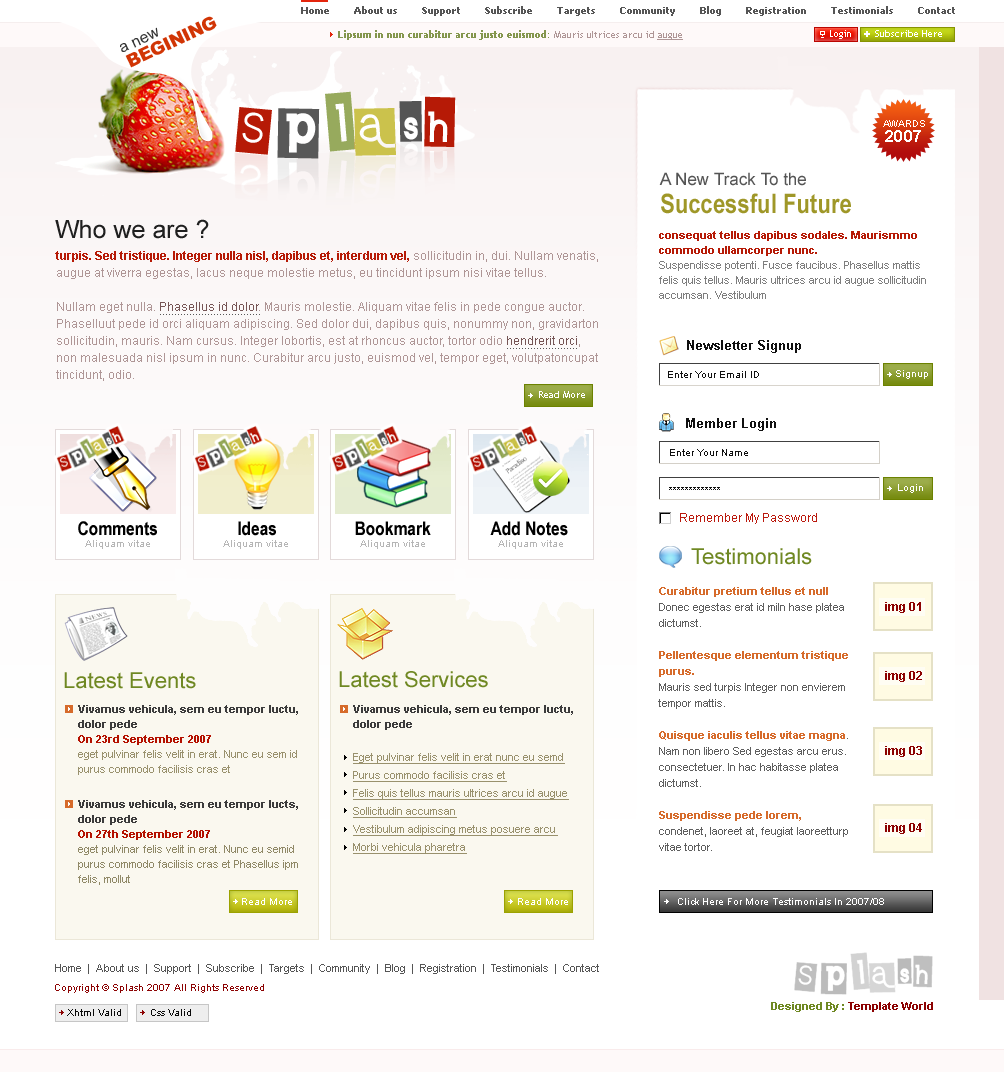
<style>
.page{position:relative;width:1004px;height:1072px;background:#ffffff}
.page>*{position:absolute;margin:0}
.t1{font:10px "Tahoma-Bold";color:#555555}
.t2{font:18px "Arial-Black";letter-spacing:-0.025em;color:#d13505}
.t3{font:16px "ArialMT";color:#333333}
.t4{font:10px "TrebuchetMS-Bold";color:#84964d}
.t5{font:10px "TrebuchetMS";color:#af9696}
.t6{font:10px "TrebuchetMS";color:#af9696;text-decoration:underline}
.t7{font:10px "TrebuchetMS";color:#ffffff}
.t8{font:10px "ArialMT";color:#ffffff;text-transform:uppercase}
.t9{font:17px "Arial-BoldMT";letter-spacing:0.025em;color:#ffffff;text-transform:uppercase}
.t10{font:17px/14px "ArialMT";color:#555555}
.t11{font:27px/14px "ArialNarrow-Bold";color:#9f9728}
.t12{font:25px "ArialMT";color:#1f1f1f}
.t13{font:11px/15px "ArialMT";color:#7e7e7e}
.t14{font:11px/15px "Arial-BoldMT";color:#b61a06}
.t15{font:12px/17px "ArialMT";color:#af9696}
.t16{font:12px/17px "Arial-BoldMT";color:#b61a06}
.t17{font:12px/17px "ArialMT";color:#765555}
.t18{font:13px "Arial-BoldMT";color:#101010}
.t19{font:10px "ArialMT";color:#101010}
.t20{font:10px "ArialMT";color:#ffffff}
.t21{font:19px "ArialNarrow-Bold";color:#000000}
.t22{font:12px "ArialMT";color:#bb190d}
.t23{font:10px "ArialMT";color:#b6b6b6}
.t24{font:22px "ArialMT";color:#6f8822}
.t25{font:11px/16px "ArialMT";color:#5e5e5e}
.t26{font:11px/16px "Arial-BoldMT";color:#d66b2b}
.t27{font:12px "Arial-BoldMT";color:#8c0202}
.t28{font:11px/15px "ArialMT";color:#99916d}
.t29{font:11px/15px "Arial-BoldMT";color:#3c3c3c}
.t30{font:11px/15px "Arial-BoldMT";color:#b41100}
.t31{font:11px/18px "ArialMT";color:#99916d;text-decoration:underline}
.t32{font:11px/15px "ArialMT";color:#908967}
.t33{font:11px "ArialMT";color:#555555}
.t34{font:10px "ArialMT";color:#8c0202}
.t35{font:10px "ArialMT";color:#0a0a0a}
.t36{font:11px "Arial-BoldMT";color:#8c0202}
.t37{font:11px "Arial-BoldMT";color:#6f8822}
</style>
<div class="page">
<p class="t1" style="left:301px;top:6px;width:654px;height:10px">Home        About us        Support        Subscribe        Targets        Community        Blog        Registration        Testimonials        Contact</p>
<p class="t2" style="left:125px;top:16px;width:92px;height:52px;rotate:-26deg">BEGINING</p>
<p class="t3" style="left:120px;top:27px;width:38px;height:25px;rotate:-25deg">a new</p>
<p class="t4" style="left:338px;top:30px;width:345px;height:10px">Lipsum in nun curabitur arcu justo euismod: <span class="t5">Mauris ultrices arcu id </span><span class="t6">augue</span></p>
<p class="t7" style="left:830px;top:30px;width:21px;height:9px">Login</p>
<p class="t7" style="left:875px;top:30px;width:67px;height:7px">Subscribe Here</p>
<p class="t8" style="left:883px;top:120px;width:42px;height:7px">awards</p>
<p class="t9" style="left:885px;top:130px;width:36px;height:12px">2007</p>
<p class="t10" style="left:659px;top:172px;width:192px;height:42px">A New Track To the <br><br><span class="t11">Successful Future</span></p>
<p class="t12" style="left:55px;top:219px;width:154px;height:20px">Who we are ?</p>
<p class="t13" style="left:659px;top:231px;width:267px;height:68px"><span class="t14">consequat tellus dapibus sodales. Maurismmo commodo ullamcorper nunc. <br></span>Suspendisse potenti. Fusce faucibus. Phasellus mattis felis quis tellus. Mauris ultrices arcu id augue sollicitudin accumsan. Vestibulum</p>
<p class="t15" style="left:55px;top:251px;width:543px;height:130px"><span class="t16">turpis. Sed tristique. Integer nulla nisl, dapibus et, interdum vel,</span> sollicitudin in, dui. Nullam venatis, augue at viverra egestas, lacus neque molestie metus, eu tincidunt ipsum nisi vitae tellus. <br><br>Nullam eget nulla. <span class="t17">Phasellus id dolor</span>. Mauris molestie. Aliquam vitae felis in pede congue auctor. Phaselluut pede id orci aliquam adipiscing. Sed dolor dui, dapibus quis, nonummy non, gravidarton sollicitudin, mauris. Nam cursus. Integer lobortis, est at rhoncus auctor, tortor odio <span class="t17">hendrerit orci</span>, non malesuada nisl ipsum in nunc. Curabitur arcu justo, euismod vel, tempor eget, volutpatoncupat tincidunt, odio.</p>
<p class="t18" style="left:687px;top:340px;width:114px;height:13px">Newsletter Signup</p>
<p class="t19" style="left:668px;top:371px;width:91px;height:7px">Enter Your Email ID</p>
<p class="t20" style="left:896px;top:370px;width:32px;height:9px">Signup</p>
<p class="t7" style="left:539px;top:391px;width:46px;height:7px">Read More</p>
<p class="t18" style="left:686px;top:418px;width:90px;height:13px">Member Login</p>
<p class="t19" style="left:670px;top:449px;width:78px;height:7px">Enter Your Name</p>
<p class="t20" style="left:898px;top:484px;width:25px;height:9px">Login</p>
<p class="t19" style="left:669px;top:487px;width:51px;height:3px">*************</p>
<p class="t21" style="left:78px;top:521px;width:79px;height:15px">Comments</p>
<p class="t21" style="left:238px;top:521px;width:38px;height:15px">Ideas</p>
<p class="t21" style="left:355px;top:521px;width:76px;height:15px">Bookmark</p>
<p class="t21" style="left:490px;top:521px;width:78px;height:15px">Add Notes</p>
<p class="t22" style="left:680px;top:513px;width:137px;height:11px">Remember My Password</p>
<p class="t23" style="left:85px;top:540px;width:65px;height:9px">Aliquam vitae</p>
<p class="t23" style="left:223px;top:540px;width:65px;height:9px">Aliquam vitae</p>
<p class="t23" style="left:360px;top:540px;width:65px;height:9px">Aliquam vitae</p>
<p class="t23" style="left:498px;top:540px;width:65px;height:9px">Aliquam vitae</p>
<p class="t24" style="left:691px;top:548px;width:121px;height:17px">Testimonials</p>
<p class="t25" style="left:658px;top:587px;width:190px;height:264px"><span class="t26">Curabitur pretium tellus et null<br></span>Donec egestas erat id miIn hase platea dictumst.<br><br><span class="t26">Pellentesque elementum tristique purus.</span> <br>Mauris sed turpis Integer non envierem tempor mattis. <br><br><span class="t26">Quisque iaculis tellus vitae magna</span>.<br>Nam non libero Sed egestas arcu erus. <br>consectetuer. In hac habitasse platea dictumst.<br><br><span class="t26">Suspendisse pede lorem,</span> <br>condenet, laoreet at, feugiat laoreetturp<br>vitae tortor.</p>
<p class="t27" style="left:885px;top:602px;width:36px;height:11px">img 01</p>
<p class="t24" style="left:64px;top:672px;width:132px;height:17px">Latest Events</p>
<p class="t24" style="left:339px;top:671px;width:149px;height:17px">Latest Services</p>
<p class="t27" style="left:885px;top:671px;width:37px;height:11px">img 02</p>
<p class="t28" style="left:78px;top:705px;width:220px;height:70px"><span class="t29">Vivamus vehicula, sem eu tempor luctu, dolor pede <br></span><span class="t30">On 23rd September 2007<br></span>eget pulvinar felis velit in erat. Nunc eu sem id purus commodo facilisis cras et</p>
<p class="t31" style="left:353px;top:705px;width:220px;height:149px"><span class="t29">Vivamus vehicula, sem eu tempor luctu, dolor pede <br><br></span>Eget pulvinar felis velit in erat nunc eu semd Purus commodo facilisis cras et<br>Felis quis tellus mauris ultrices arcu id augue Sollicitudin accumsan<br>Vestibulum adipiscing metus posuere arcu<br>Morbi vehicula pharetra</p>
<p class="t27" style="left:885px;top:746px;width:37px;height:11px">img 03</p>
<p class="t32" style="left:78px;top:800px;width:220px;height:85px"><span class="t29">Vivamus vehicula, sem eu tempor lucts, dolor pede<br></span><span class="t30">On 27th September 2007<br></span>eget pulvinar felis velit in erat. Nunc eu semid purus commodo facilisis cras et Phasellus ipm felis, mollut</p>
<p class="t27" style="left:885px;top:823px;width:37px;height:11px">img 04</p>
<p class="t20" style="left:242px;top:898px;width:50px;height:7px">Read More</p>
<p class="t20" style="left:518px;top:898px;width:50px;height:7px">Read More</p>
<p class="t20" style="left:678px;top:898px;width:206px;height:7px">Click Here For More Testimonials In 2007/08</p>
<p class="t33" style="left:55px;top:964px;width:544px;height:10px">Home  |  About us  |  Support  |  Subscribe  |  Targets  |  Community  |  Blog  |  Registration  |  Testimonials  |  Contact</p>
<p class="t34" style="left:55px;top:984px;width:209px;height:9px">Copyright © Splash 2007 All Rights Reserved</p>
<p class="t35" style="left:67px;top:1009px;width:54px;height:7px">Xhtml Valid</p>
<p class="t35" style="left:151px;top:1009px;width:40px;height:7px">Css Valid</p>
<p class="t36" style="left:771px;top:1002px;width:162px;height:10px"><span class="t37">Designed By : </span>Template World</p>
</div>
